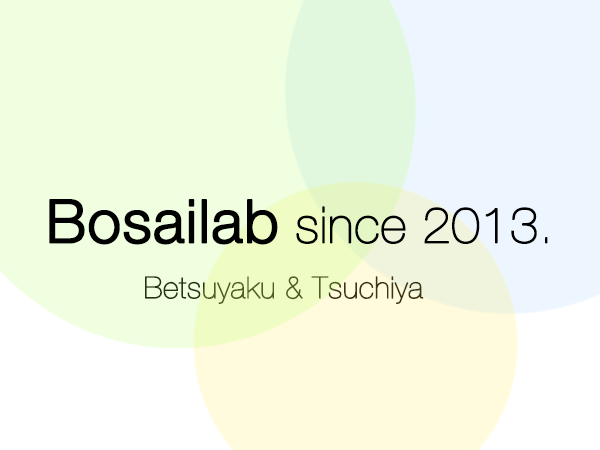
<style>
.page{position:relative;width:600px;height:450px;background:#efffdf}
.page>*{position:absolute;margin:0}
.t1{font:50px "HelveticaNeue-UltraLight";color:#000000;font-weight:bold}
.t2{font:60px "HelveticaNeue-Light";color:#000000;font-weight:bold}
.t3{font:30px "HelveticaNeue-UltraLight";font-weight:bold}
</style>
<div class="page">
<p class="t1" style="left:49px;top:199px;width:499px;height:46px"><span class="t2">Bosailab</span> since 2013.</p>
<p class="t3" style="left:145px;top:276px;width:279px;height:28px">Betsuyaku &amp; Tsuchiya</p>
</div>
